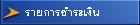
<style>
.page{position:relative;width:140px;height:25px}
.page>*{position:absolute;margin:0}
.t1{font:15.3px "EucrosiaDSE";color:#ffffff;scale:1.12 1}
</style>
<div class="page">
<p class="t1" style="left:25px;top:7px;width:74px;height:9px">ÃÒÂ¡ÒÃªÓÃÐà§Ô¹</p>
</div>
